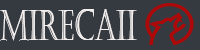
<style>
.page{position:relative;width:200px;height:50px;background:#343a40}
.page>*{position:absolute;margin:0}
.t1{font:43.1px "Castellar";color:#f4efef;scale:0.62 1}
</style>
<div class="page">
<p class="t1" style="left:0px;top:9px;width:137px;height:32px">mirecaII</p>
</div>
